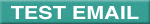
<style>
.page{position:relative;width:150px;height:24px}
.page>*{position:absolute;margin:0}
.t1{font:18px "Helvetica-Bold";color:#ffffff;scale:1.2 1}
</style>
<div class="page">
<p class="t1" style="left:11px;top:5px;width:128px;height:15px">TEST EMAIL</p>
</div>
